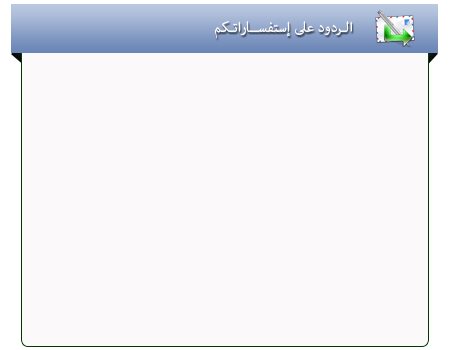
<style>
.page{position:relative;width:450px;height:350px;background:#fbf9f9}
.page>*{position:absolute;margin:0}
.t1{font:20px "AdobeArabic-Regular";color:#ffffff}
</style>
<div class="page">
<p class="t1" style="left:215px;top:21px;width:137px;height:18px">الـردود على إستفســاراتـكم</p>
</div>
